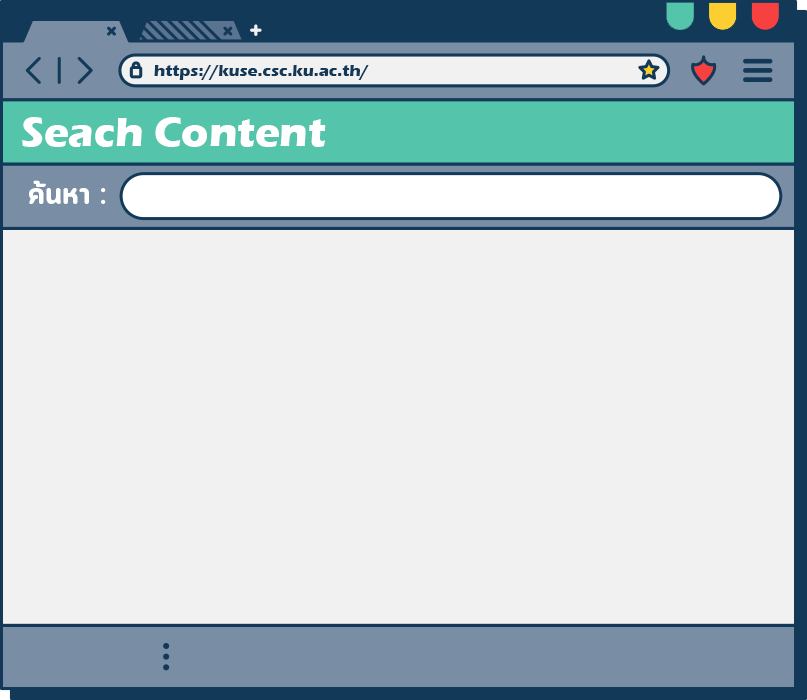
<style>
.page{position:relative;width:807px;height:700px;background:#f1f1f1}
.page>*{position:absolute;margin:0}
.t1{font:16.7px "ErasITC-Bold";color:#133958}
.t2{font:41.7px "ErasITC-Bold";color:#ffffff}
.t3{font:31.7px "CloudSoft-Bold";color:#ffffff}
</style>
<div class="page">
<p class="t1" style="left:154px;top:65px;width:215px;height:15px">https://kuse.csc.ku.ac.th/</p>
<p class="t2" style="left:22px;top:117px;width:304px;height:30px">Seach Content</p>
<p class="t3" style="left:29px;top:180px;width:77px;height:24px">ค้นหา :</p>
</div>
